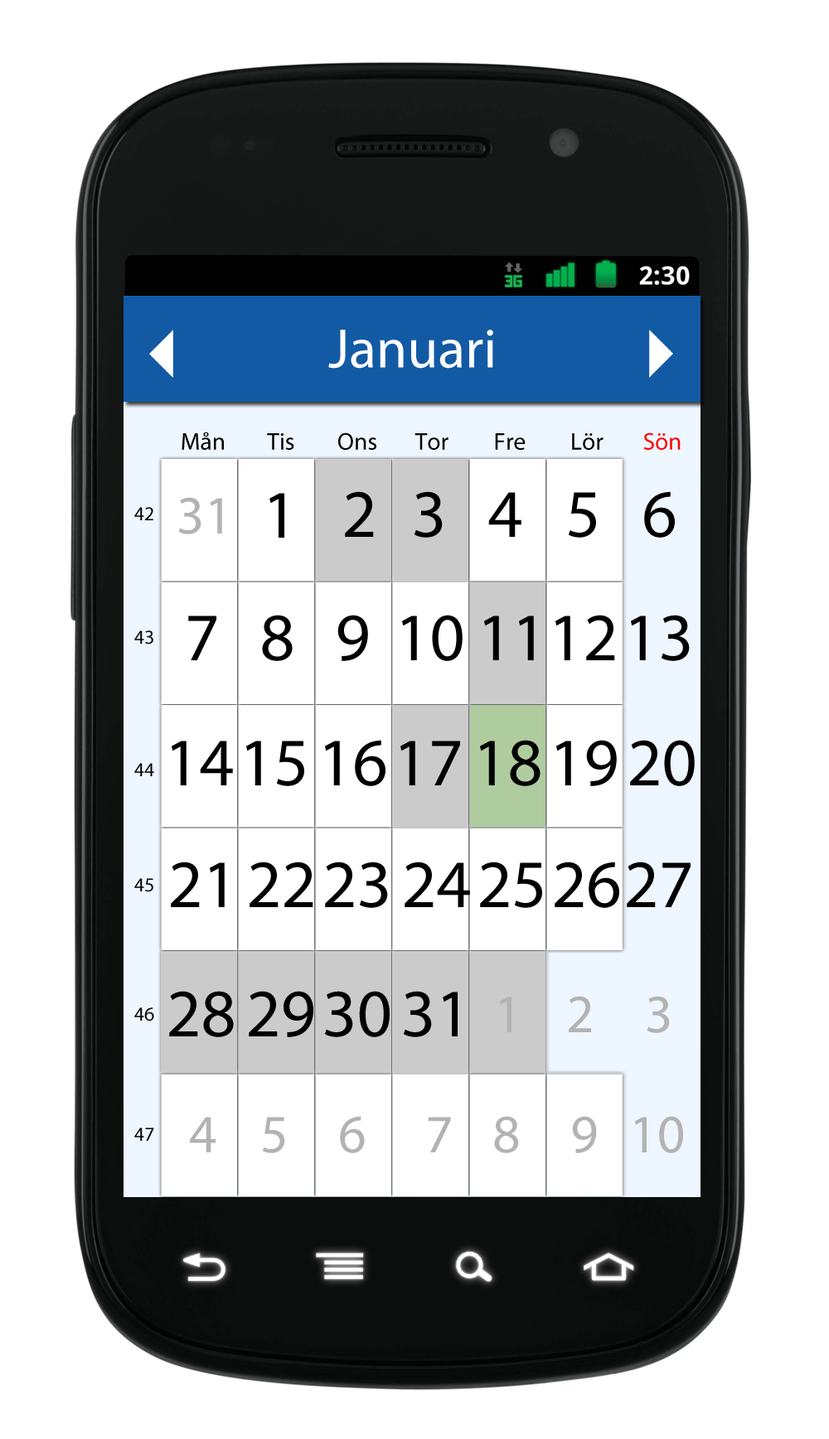
<style>
.page{position:relative;width:829px;height:1439px;background:#ffffff}
.page>*{position:absolute;margin:0}
.t1{font:56px "MyriadPro-Regular";color:#ffffff}
.t2{font:24.4px "MyriadPro-Regular";color:#000000}
.t3{font:24.4px "MyriadPro-Regular";color:#ff0000}
.t4{font:54.3px "MyriadPro-Regular";color:#b3b3b3}
.t5{font:68px "MyriadPro-Regular";color:#000000}
.t6{font:19.9px "MyriadPro-Regular";color:#000000}
</style>
<div class="page">
<p class="t1" style="left:328px;top:330px;width:165px;height:39px">Januari</p>
<p class="t2" style="left:181px;top:432px;width:43px;height:18px">Mån</p>
<p class="t2" style="left:267px;top:433px;width:27px;height:17px">Tis</p>
<p class="t2" style="left:338px;top:433px;width:38px;height:17px">Ons</p>
<p class="t2" style="left:414px;top:433px;width:34px;height:17px">Tor</p>
<p class="t2" style="left:495px;top:433px;width:30px;height:17px">Fre</p>
<p class="t2" style="left:572px;top:433px;width:31px;height:17px">Lör</p>
<p class="t3" style="left:643px;top:433px;width:37px;height:17px">Sön</p>
<p class="t4" style="left:178px;top:497px;width:44px;height:37px">31</p>
<p class="t5" style="left:269px;top:493px;width:15px;height:45px">1</p>
<p class="t5" style="left:345px;top:491px;width:29px;height:46px">2</p>
<p class="t5" style="left:414px;top:491px;width:28px;height:47px">3</p>
<p class="t5" style="left:488px;top:492px;width:33px;height:45px">4</p>
<p class="t5" style="left:568px;top:492px;width:28px;height:46px">5</p>
<p class="t5" style="left:644px;top:491px;width:30px;height:47px">6</p>
<p class="t6" style="left:134px;top:507px;width:19px;height:13px">42</p>
<p class="t5" style="left:188px;top:616px;width:28px;height:44px">7</p>
<p class="t5" style="left:262px;top:615px;width:30px;height:46px">8</p>
<p class="t5" style="left:337px;top:615px;width:31px;height:46px">9</p>
<p class="t5" style="left:402px;top:615px;width:60px;height:46px">10</p>
<p class="t5" style="left:484px;top:616px;width:50px;height:44px">11</p>
<p class="t5" style="left:555px;top:615px;width:60px;height:45px">12</p>
<p class="t5" style="left:631px;top:615px;width:58px;height:46px">13</p>
<p class="t6" style="left:134px;top:631px;width:19px;height:14px">43</p>
<p class="t5" style="left:172px;top:741px;width:61px;height:44px">14</p>
<p class="t5" style="left:246px;top:741px;width:58px;height:45px">15</p>
<p class="t5" style="left:325px;top:740px;width:60px;height:46px">16</p>
<p class="t5" style="left:400px;top:741px;width:60px;height:44px">17</p>
<p class="t5" style="left:480px;top:740px;width:60px;height:46px">18</p>
<p class="t5" style="left:556px;top:740px;width:60px;height:46px">19</p>
<p class="t5" style="left:630px;top:740px;width:64px;height:46px">20</p>
<p class="t6" style="left:134px;top:763px;width:20px;height:13px">44</p>
<p class="t5" style="left:171px;top:862px;width:54px;height:45px">21</p>
<p class="t5" style="left:249px;top:862px;width:64px;height:45px">22</p>
<p class="t5" style="left:325px;top:862px;width:63px;height:46px">23</p>
<p class="t5" style="left:404px;top:862px;width:66px;height:45px">24</p>
<p class="t5" style="left:480px;top:862px;width:62px;height:46px">25</p>
<p class="t5" style="left:554px;top:862px;width:65px;height:46px">26</p>
<p class="t5" style="left:626px;top:862px;width:64px;height:45px">27</p>
<p class="t6" style="left:134px;top:878px;width:19px;height:14px">45</p>
<p class="t5" style="left:169px;top:991px;width:65px;height:46px">28</p>
<p class="t5" style="left:249px;top:991px;width:64px;height:46px">29</p>
<p class="t5" style="left:325px;top:991px;width:64px;height:46px">30</p>
<p class="t5" style="left:404px;top:991px;width:53px;height:46px">31</p>
<p class="t4" style="left:499px;top:997px;width:12px;height:35px">1</p>
<p class="t4" style="left:568px;top:996px;width:23px;height:36px">2</p>
<p class="t4" style="left:646px;top:996px;width:23px;height:37px">3</p>
<p class="t6" style="left:134px;top:1008px;width:20px;height:14px">46</p>
<p class="t4" style="left:190px;top:1117px;width:26px;height:36px">4</p>
<p class="t4" style="left:263px;top:1117px;width:22px;height:36px">5</p>
<p class="t4" style="left:340px;top:1116px;width:25px;height:37px">6</p>
<p class="t4" style="left:428px;top:1117px;width:23px;height:36px">7</p>
<p class="t4" style="left:494px;top:1116px;width:25px;height:37px">8</p>
<p class="t4" style="left:572px;top:1116px;width:25px;height:37px">9</p>
<p class="t4" style="left:634px;top:1116px;width:49px;height:37px">10</p>
<p class="t6" style="left:134px;top:1128px;width:20px;height:13px">47</p>
</div>
